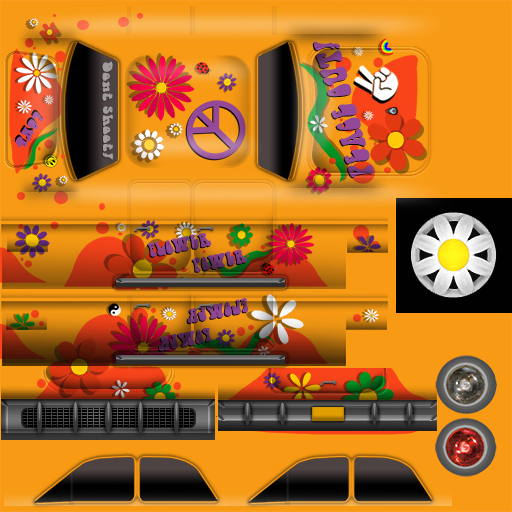
<style>
.page{position:relative;width:512px;height:512px;background:#f89a14}
.page>*{position:absolute;margin:0}
.t1{font:33.1px "HippieMovement";color:#934997;scale:0.83 1}
.t2{font:13.3px "HippieMovement";color:#a19d9d;scale:1.39 1}
.t3{font:15.2px "HippieMovement";color:#954c99;scale:1.28 1}
.t4{font:19.1px "HippieMovement";color:#87438b;scale:0.87 1}
.t5{font:19.1px "HippieMovement";scale:0.87 1}
.t6{font:19.1px "HippieMovement";color:#854289;scale:0.87 1}
.t7{font:19.1px "HippieMovement";color:#462248;scale:0.87 1}
</style>
<div class="page">
<p class="t1" style="left:313px;top:41px;width:61px;height:137px;rotate:-106deg">PEACE OUT!</p>
<p class="t2" style="left:102px;top:61px;width:11px;height:99px;rotate:90deg">Dont Shoot!</p>
<p class="t3" style="left:15px;top:111px;width:29px;height:37px;rotate:124deg">lOVE</p>
<p class="t4" style="left:148px;top:233px;width:64px;height:24px;rotate:-11deg">FLOWER</p>
<p class="t5" style="left:192px;top:249px;width:55px;height:23px;rotate:-11deg">POWER</p>
<p class="t6" style="left:187px;top:298px;width:62px;height:26px;rotate:169deg">FLOWER</p>
<p class="t7" style="left:159px;top:328px;width:53px;height:23px;rotate:169deg">POWER</p>
</div>
